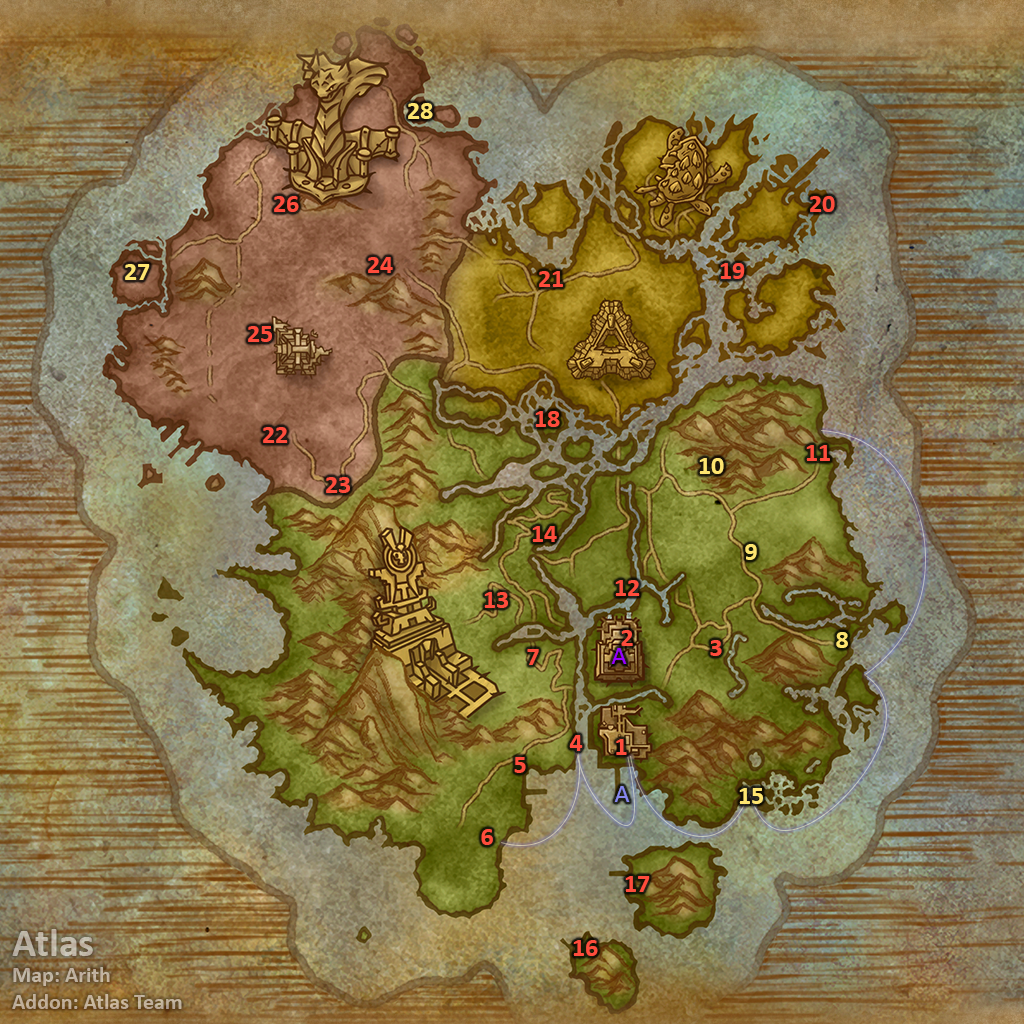
<style>
.page{position:relative;width:1024px;height:1024px}
.page>*{position:absolute;margin:0}
.t1{font:26px "Calibri-Bold";color:#fee570}
.t2{font:26px "Calibri-Bold";color:#ff4c3c}
.t3{font:26px "Calibri";color:#9900ff}
.t4{font:26px "Calibri";color:#8788ee}
.t5{font:22px "Calibri-Bold";color:#c0b2a0}
.t6{font:40px "Calibri-Bold";color:#c0b2a0}
</style>
<div class="page">
<p class="t1" style="left:408px;top:103px;width:25px;height:16px">28</p>
<p class="t2" style="left:274px;top:196px;width:25px;height:16px">26</p>
<p class="t2" style="left:810px;top:196px;width:25px;height:16px">20</p>
<p class="t2" style="left:368px;top:257px;width:25px;height:16px">24</p>
<p class="t1" style="left:125px;top:264px;width:25px;height:16px">27</p>
<p class="t2" style="left:720px;top:263px;width:25px;height:16px">19</p>
<p class="t2" style="left:539px;top:271px;width:24px;height:16px">21</p>
<p class="t2" style="left:248px;top:326px;width:24px;height:16px">25</p>
<p class="t2" style="left:535px;top:411px;width:25px;height:16px">18</p>
<p class="t2" style="left:263px;top:427px;width:25px;height:16px">22</p>
<p class="t2" style="left:806px;top:445px;width:24px;height:16px">11</p>
<p class="t1" style="left:699px;top:458px;width:25px;height:16px">10</p>
<p class="t2" style="left:326px;top:477px;width:24px;height:16px">23</p>
<p class="t2" style="left:532px;top:526px;width:25px;height:16px">14</p>
<p class="t1" style="left:745px;top:544px;width:12px;height:16px">9</p>
<p class="t2" style="left:615px;top:580px;width:25px;height:16px">12</p>
<p class="t2" style="left:484px;top:592px;width:24px;height:16px">13</p>
<p class="t2" style="left:621px;top:630px;width:12px;height:16px">2</p>
<p class="t2" style="left:710px;top:640px;width:12px;height:16px">3</p>
<p class="t1" style="left:836px;top:632px;width:12px;height:16px">8</p>
<p class="t2" style="left:527px;top:649px;width:12px;height:16px">7</p>
<p class="t3" style="left:611px;top:648px;width:16px;height:16px">A</p>
<p class="t2" style="left:569px;top:735px;width:14px;height:16px">4</p>
<p class="t2" style="left:616px;top:739px;width:11px;height:16px">1</p>
<p class="t2" style="left:514px;top:757px;width:12px;height:16px">5</p>
<p class="t4" style="left:614px;top:786px;width:16px;height:16px">A</p>
<p class="t1" style="left:739px;top:788px;width:24px;height:16px">15</p>
<p class="t2" style="left:481px;top:829px;width:12px;height:16px">6</p>
<p class="t2" style="left:625px;top:876px;width:25px;height:16px">17</p>
<p class="t5" style="left:12px;top:929px;width:170px;height:80px"><span class="t6">Atlas<br></span>Map: Arith<br>Addon: Atlas Team</p>
<p class="t2" style="left:573px;top:940px;width:25px;height:16px">16</p>
</div>
